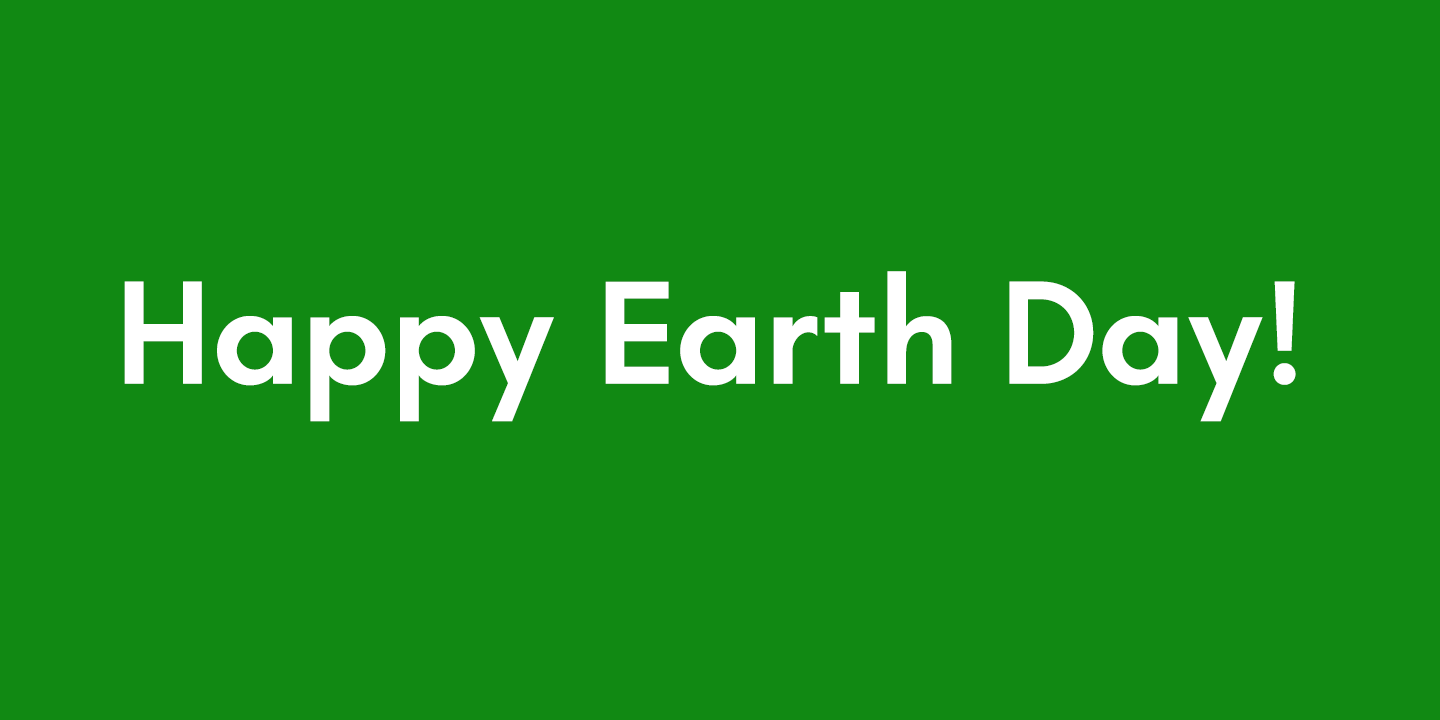
<style>
.page{position:relative;width:1440px;height:720px;background:#118913}
.page>*{position:absolute;margin:0}
.t1{font:150px "Teachers-SemiBold";color:#ffffff}
</style>
<div class="page">
<p class="t1" style="left:124px;top:271px;width:1172px;height:151px">Happy Earth Day!</p>
</div>
